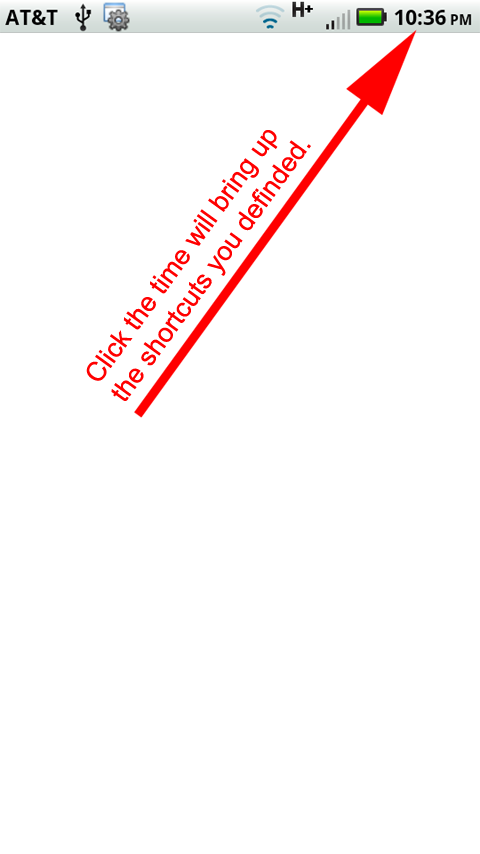
<style>
.page{position:relative;width:480px;height:854px;background:#ffffff}
.page>*{position:absolute;margin:0}
.t1{font:26.7px "ArialMT";color:#ff0000}
</style>
<div class="page">
<p class="t1" style="left:86px;top:130px;width:225px;height:271px;rotate:-54deg">Click the time will bring up <br>the shortcuts you definded.</p>
</div>
